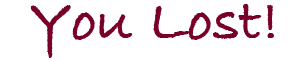
<style>
.page{position:relative;width:300px;height:60px;background:#ffffff}
.page>*{position:absolute;margin:0}
.t1{font:60px "BradleyHandITCTT-Bold";color:#7a0026}
</style>
<div class="page">
<p class="t1" style="left:30px;top:4px;width:244px;height:54px">You Lost!</p>
</div>
